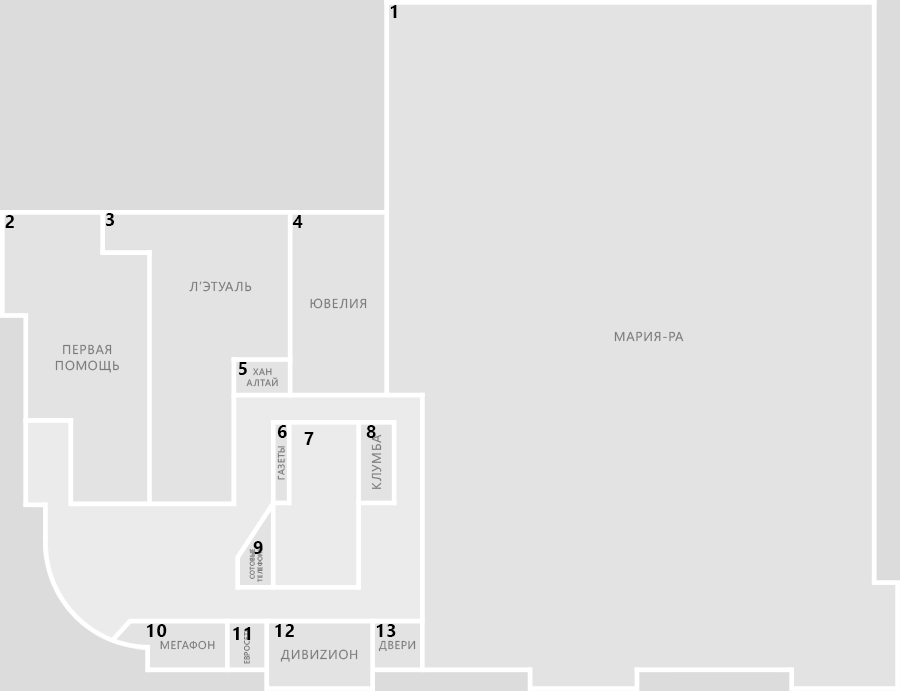
<style>
.page{position:relative;width:900px;height:691px;background:#e3e3e3}
.page>*{position:absolute;margin:0}
.t1{font:18px "SegoeUI-Bold";letter-spacing:0.05em;color:#000000;text-transform:uppercase}
.t2{font:13.1px "SegoeUI";letter-spacing:0.05em;color:#7c7c7c;text-transform:uppercase}
.t3{font:9.4px "SegoeUI";letter-spacing:0.05em;text-transform:uppercase}
.t4{font:6.6px "SegoeUI";letter-spacing:0.05em;color:#7c7c7c;text-transform:uppercase}
.t5{font:11.2px "SegoeUI";letter-spacing:0.05em;color:#7c7c7c;text-transform:uppercase}
</style>
<div class="page">
<p class="t1" style="left:390px;top:5px;width:7px;height:13px">1</p>
<p class="t1" style="left:5px;top:215px;width:9px;height:13px">2</p>
<p class="t1" style="left:106px;top:213px;width:8px;height:13px">3</p>
<p class="t1" style="left:292px;top:215px;width:11px;height:13px">4</p>
<p class="t2" style="left:189px;top:281px;width:63px;height:11px">Л’этуаль</p>
<p class="t2" style="left:310px;top:298px;width:57px;height:11px">Ювелия</p>
<p class="t2" style="left:614px;top:331px;width:70px;height:11px">Мария-ра</p>
<p class="t2" style="left:55px;top:344px;width:64px;height:29px;text-align:center">Первая<br>помощь</p>
<p class="t1" style="left:239px;top:362px;width:8px;height:13px">5</p>
<p class="t3" style="left:246px;top:368px;width:32px;height:19px;text-align:center">Хан<br>Алтай</p>
<p class="t1" style="left:277px;top:425px;width:10px;height:13px">6</p>
<p class="t1" style="left:366px;top:425px;width:10px;height:13px">8</p>
<p class="t1" style="left:304px;top:432px;width:10px;height:13px">7</p>
<p class="t2" style="left:371px;top:434px;width:11px;height:55px;rotate:-90deg">Клумба</p>
<p class="t3" style="left:277px;top:446px;width:8px;height:34px;rotate:-90deg">Газеты</p>
<p class="t1" style="left:253px;top:541px;width:10px;height:13px">9</p>
<p class="t4" style="left:249px;top:546px;width:14px;height:36px;text-align:center;rotate:-90deg">Сотовые<br>телефоны</p>
<p class="t1" style="left:147px;top:624px;width:20px;height:13px">10</p>
<p class="t1" style="left:233px;top:627px;width:18px;height:13px">11</p>
<p class="t1" style="left:275px;top:624px;width:19px;height:13px">12</p>
<p class="t1" style="left:376px;top:624px;width:20px;height:13px">13</p>
<p class="t5" style="left:160px;top:640px;width:55px;height:10px">Мегафон</p>
<p class="t5" style="left:378px;top:640px;width:38px;height:12px">Двери</p>
<p class="t2" style="left:280px;top:649px;width:78px;height:13px">Дивиzион</p>
</div>
